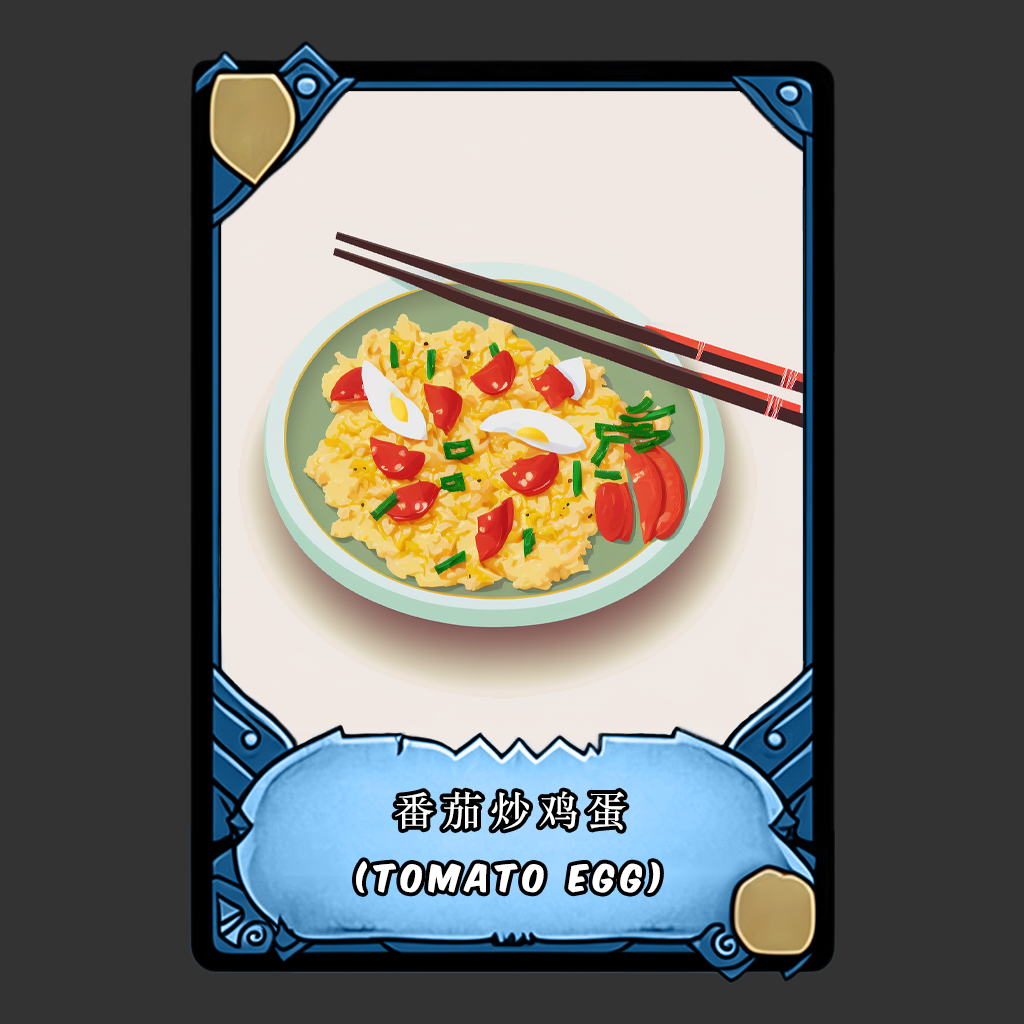
<style>
.page{position:relative;width:1024px;height:1024px;background:#333333}
.page>*{position:absolute;margin:0}
.t1{font:40px "STSongti-SC-Bold";letter-spacing:0.2em;color:#ffffff}
.t2{font:32px "KomikaAxis";letter-spacing:0.2em;color:#ffffff}
</style>
<div class="page">
<p class="t1" style="left:395px;top:791px;width:231px;height:39px">番茄炒鸡蛋</p>
<p class="t2" style="left:356px;top:861px;width:304px;height:32px">(Tomato Egg)</p>
</div>
